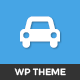
<style>
.page{position:relative;width:80px;height:80px;background:#46a5e5}
.page>*{position:absolute;margin:0}
.t1{font:9px "Montserrat-Regular";color:#ffffff;text-transform:uppercase}
</style>
<div class="page">
<p class="t1" style="left:14px;top:68px;width:52px;height:8px">WP theme</p>
</div>
